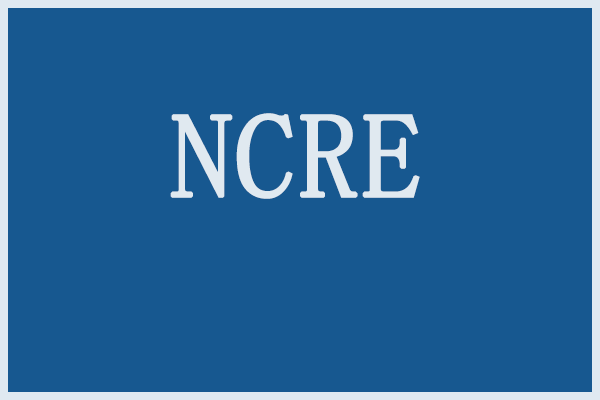
<style>
.page{position:relative;width:600px;height:400px;background:#175890}
.page>*{position:absolute;margin:0}
.t1{font:120px "NSimSun";color:#e0e9f0;font-weight:bold}
</style>
<div class="page">
<p class="t1" style="left:170px;top:113px;width:250px;height:86px">NCRE</p>
</div>
